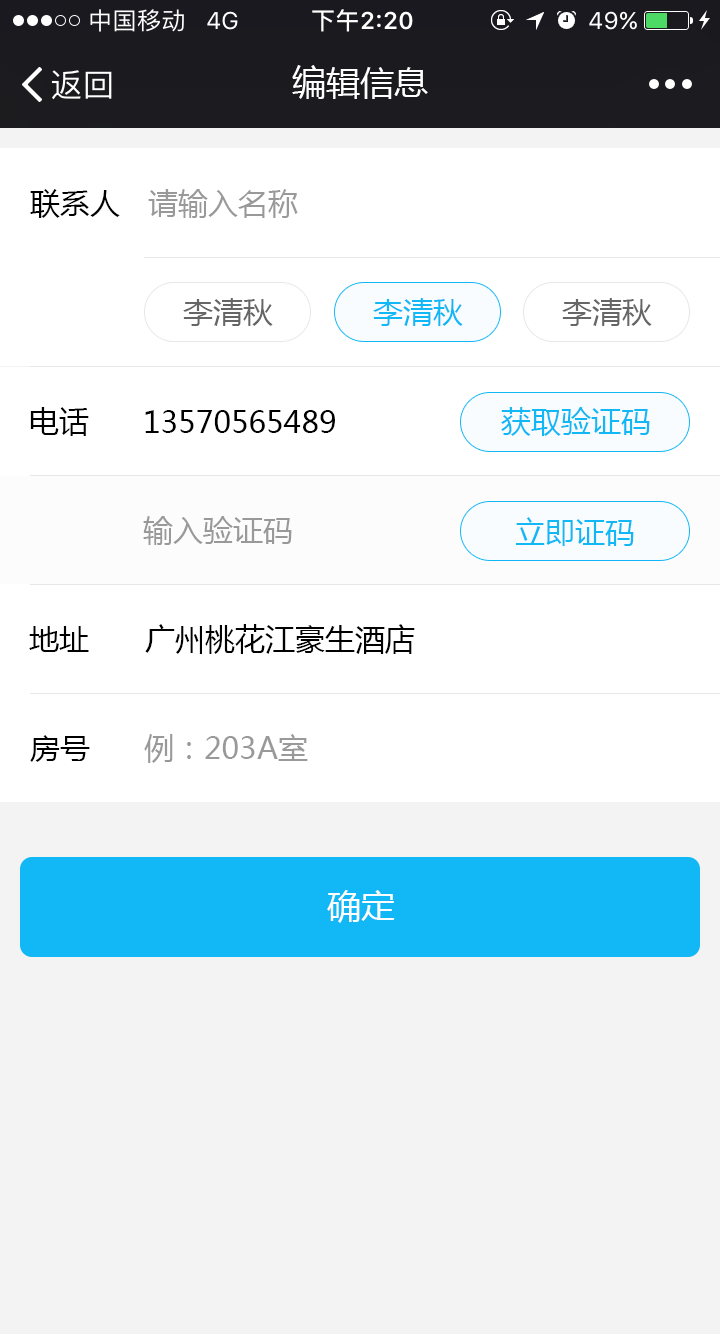
<style>
.page{position:relative;width:720px;height:1334px;background:#ffffff}
.page>*{position:absolute;margin:0}
.t1{font:34px "MicrosoftYaHei";color:#ffffff}
.t2{font:30px "MicrosoftYaHei";color:#000000}
.t3{font:30px "MicrosoftYaHei";color:#999999}
.t4{font:30px "MicrosoftYaHei";color:#666666}
.t5{font:30px "MicrosoftYaHei";color:#12b7f5}
</style>
<div class="page">
<p class="t1" style="left:292px;top:65px;width:136px;height:34px">编辑信息</p>
<p class="t2" style="left:30px;top:189px;width:90px;height:29px">联系人</p>
<p class="t3" style="left:148px;top:189px;width:150px;height:29px">请输入名称</p>
<p class="t4" style="left:183px;top:298px;width:90px;height:28px">李清秋</p>
<p class="t5" style="left:373px;top:298px;width:90px;height:28px">李清秋</p>
<p class="t4" style="left:562px;top:298px;width:90px;height:28px">李清秋</p>
<p class="t2" style="left:30px;top:407px;width:59px;height:29px">电话</p>
<p class="t2" style="left:145px;top:410px;width:190px;height:23px">13570565489</p>
<p class="t5" style="left:501px;top:407px;width:149px;height:29px">获取验证码</p>
<p class="t3" style="left:143px;top:516px;width:149px;height:29px">输入验证码</p>
<p class="t5" style="left:515px;top:517px;width:119px;height:29px">立即证码</p>
<p class="t2" style="left:29px;top:626px;width:60px;height:26px">地址</p>
<p class="t2" style="left:145px;top:624px;width:270px;height:30px">广州桃花江豪生酒店</p>
<p class="t2" style="left:30px;top:735px;width:60px;height:27px">房号</p>
<p class="t3" style="left:144px;top:734px;width:164px;height:29px">例：203A室</p>
<p class="t1" style="left:327px;top:890px;width:68px;height:33px">确定</p>
</div>
